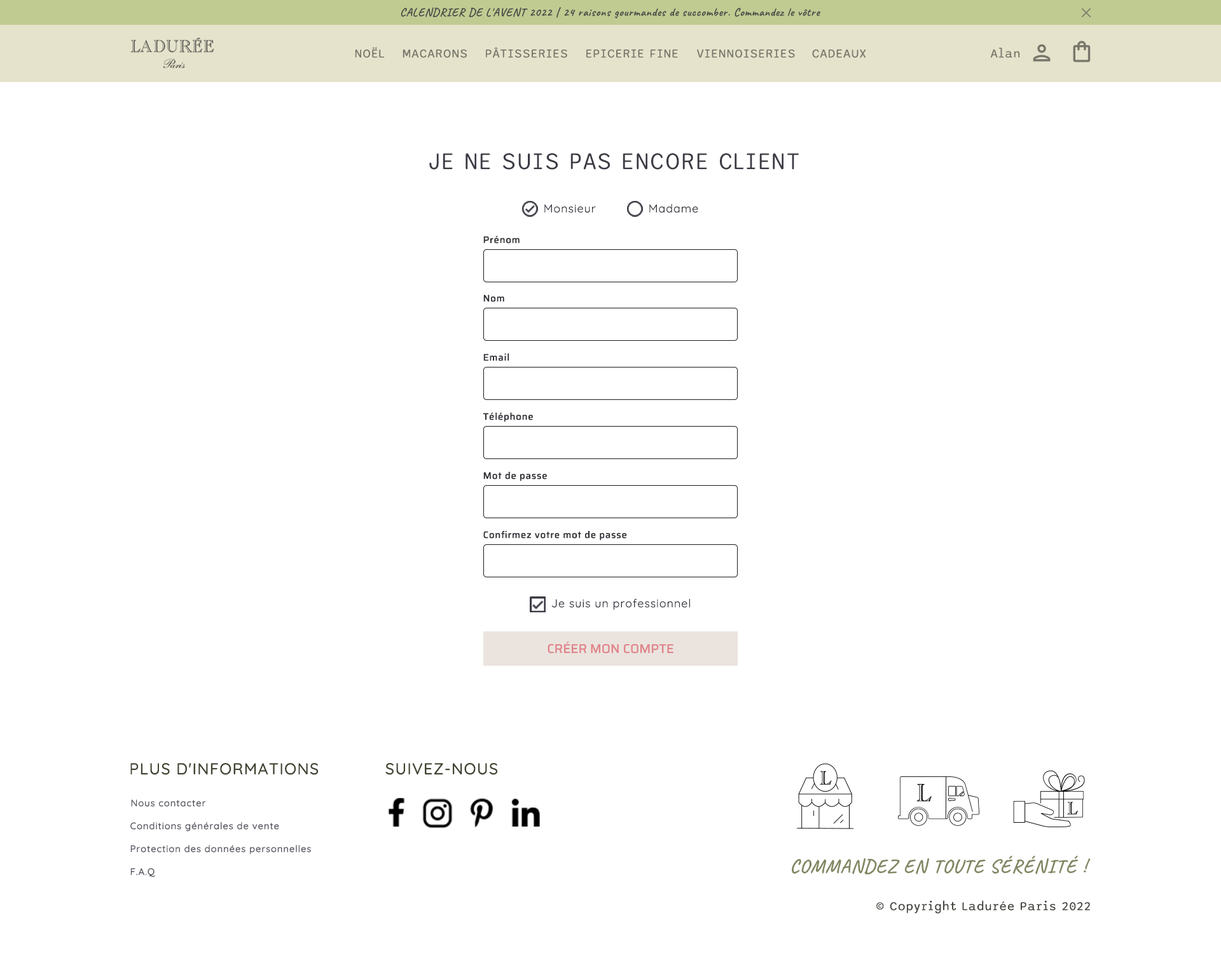
<style>
.page{position:relative;width:1221px;height:976px;background:#ffffff}
.page>*{position:absolute;margin:0}
.t1{font:11.4px "Caveat-Bold";letter-spacing:0.05em;color:#454545}
.t2{font:12.7px "Sono-Regular";letter-spacing:0.05em;color:#78776b}
.t3{font:25.4px "Sono-Regular";letter-spacing:0.05em;color:#3c3b45;text-transform:uppercase;scale:0.92 1}
.t4{font:11.4px "Quicksand-Regular";letter-spacing:0.05em;color:#3c3b45}
.t5{font:9.5px "Saira-Medium";letter-spacing:0.05em;color:#2d2c33}
.t6{font:12.7px "Saira-Medium";color:#e0838a;text-transform:uppercase}
.t7{font:15.9px "Quicksand-Medium";letter-spacing:0.05em;color:#414532;text-transform:uppercase}
.t8{font:15.9px "Quicksand-Medium";letter-spacing:0.05em;color:#414532}
.t9{font:9.5px "Quicksand-Medium";letter-spacing:0.05em;color:#5a5a66}
.t10{font:19.1px "Caveat-Bold";letter-spacing:0.05em;color:#7f8761}
.t11{font:12.7px "Sono-Regular";letter-spacing:0.05em;color:#45443d}
</style>
<div class="page">
<p class="t1" style="left:401px;top:7px;width:420px;height:11px">CALENDRIER DE L'AVENT 2022 | 24 raisons gourmandes de succomber. Commandez le vôtre</p>
<p class="t2" style="left:355px;top:47px;width:30px;height:11px">NOËL</p>
<p class="t2" style="left:403px;top:49px;width:65px;height:9px">MACARONS</p>
<p class="t2" style="left:486px;top:47px;width:81px;height:11px">PÂTISSERIES</p>
<p class="t2" style="left:586px;top:49px;width:92px;height:9px">EPICERIE FINE</p>
<p class="t2" style="left:697px;top:49px;width:98px;height:9px">VIENNOISERIES</p>
<p class="t2" style="left:812px;top:49px;width:54px;height:9px">CADEAUX</p>
<p class="t2" style="left:991px;top:48px;width:29px;height:10px">Alan</p>
<p class="t3" style="left:429px;top:153px;width:370px;height:17px">Je ne suis pas encore client</p>
<p class="t4" style="left:544px;top:204px;width:52px;height:9px">Monsieur</p>
<p class="t4" style="left:649px;top:204px;width:49px;height:9px">Madame</p>
<p class="t5" style="left:483px;top:236px;width:37px;height:8px">Prénom</p>
<p class="t5" style="left:483px;top:295px;width:21px;height:7px">Nom</p>
<p class="t5" style="left:483px;top:354px;width:27px;height:7px">Email</p>
<p class="t5" style="left:483px;top:413px;width:50px;height:9px">Téléphone</p>
<p class="t5" style="left:483px;top:472px;width:64px;height:10px">Mot de passe</p>
<p class="t5" style="left:483px;top:531px;width:144px;height:10px">Confirmez votre mot de passe</p>
<p class="t4" style="left:551px;top:599px;width:139px;height:11px">Je suis un professionnel</p>
<p class="t6" style="left:548px;top:641px;width:126px;height:13px">créer mon compte</p>
<p class="t7" style="left:130px;top:763px;width:189px;height:12px">Plus d'informations</p>
<p class="t8" style="left:385px;top:763px;width:113px;height:12px">SUIVEZ-NOUS</p>
<p class="t9" style="left:131px;top:800px;width:75px;height:7px">Nous contacter</p>
<p class="t9" style="left:130px;top:822px;width:149px;height:10px">Conditions générales de vente</p>
<p class="t9" style="left:130px;top:845px;width:181px;height:10px">Protection des données personnelles</p>
<p class="t10" style="left:792px;top:856px;width:299px;height:19px">COMMANDEZ EN TOUTE SÉRÉNITÉ !</p>
<p class="t9" style="left:130px;top:868px;width:25px;height:9px">F.A.Q</p>
<p class="t11" style="left:877px;top:901px;width:214px;height:13px">© Copyright Ladurée Paris 2022</p>
</div>
